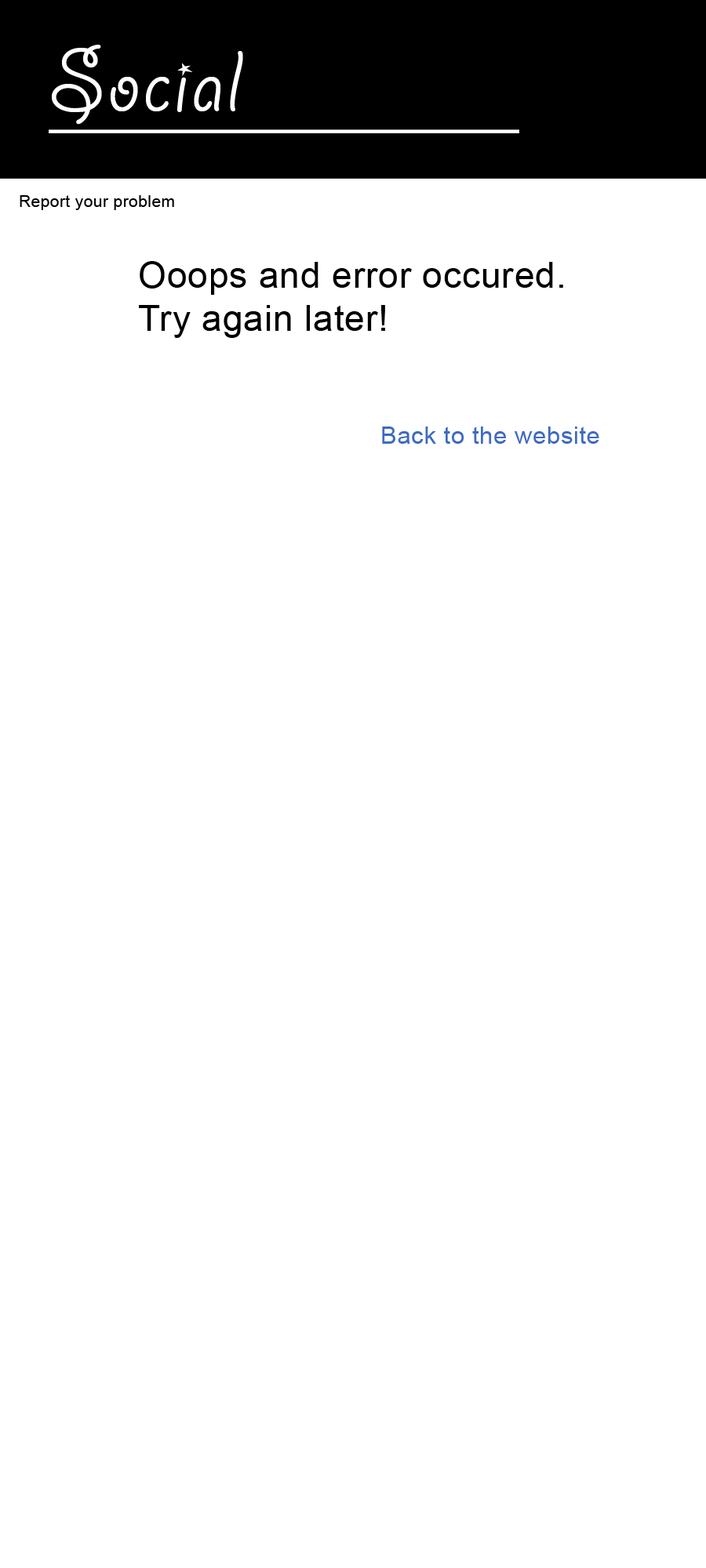
<style>
.page{position:relative;width:706px;height:1568px;background:#ffffff}
.page>*{position:absolute;margin:0}
.t1{font:97.2px "GiddyupStd";letter-spacing:0.02em;color:#ffffff}
.t2{font:16.5px "ArialMT";letter-spacing:0.02em;color:#000000}
.t3{font:36.1px "ArialMT";letter-spacing:0.02em;color:#000000}
.t4{font:24.3px "ArialMT";letter-spacing:0.02em;color:#3f6ac0}
</style>
<div class="page">
<p class="t1" style="left:52px;top:45px;width:191px;height:80px">Social</p>
<p class="t2" style="left:20px;top:195px;width:154px;height:15px">Report your problem</p>
<p class="t3" style="left:139px;top:261px;width:424px;height:77px">Ooops and error occured.<br>Try again later!</p>
<p class="t4" style="left:382px;top:426px;width:217px;height:18px">Back to the website</p>
</div>
